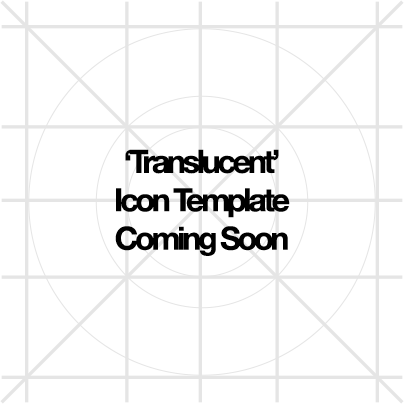
<style>
.page{position:relative;width:404px;height:404px;background:#ffffff}
.page>*{position:absolute;margin:0}
.t1{font:32px "HelveticaNeue-Bold";letter-spacing:-0.1em;color:#000000}
</style>
<div class="page">
<p class="t1" style="left:115px;top:149px;width:175px;height:107px;text-align:center">‘Translucent’<br>Icon Template<br>Coming Soon</p>
</div>
